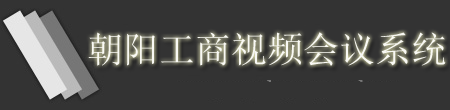
<style>
.page{position:relative;width:450px;height:110px;background:#333333}
.page>*{position:absolute;margin:0}
.t1{font:36px "NSimSun";color:#e6e6e6}
</style>
<div class="page">
<p class="t1" style="left:88px;top:32px;width:358px;height:34px">朝阳工商视频会议系统</p>
</div>
